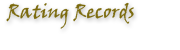
<style>
.page{position:relative;width:180px;height:50px;background:#ffffff}
.page>*{position:absolute;margin:0}
.t1{font:19.1px "VinerHandITC";color:#7c6b0e}
</style>
<div class="page">
<p class="t1" style="left:6px;top:2px;width:128px;height:27px">Rating Records</p>
</div>
